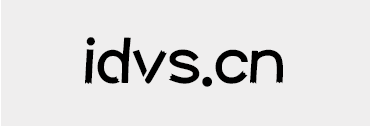
<style>
.page{position:relative;width:370px;height:126px;background:#efeeee}
.page>*{position:absolute;margin:0}
.t1{font:61.1px "DFCaiDai-W7-WINP-BF";color:#000000}
</style>
<div class="page">
<p class="t1" style="left:85px;top:37px;width:198px;height:50px">idvs.cn</p>
</div>
